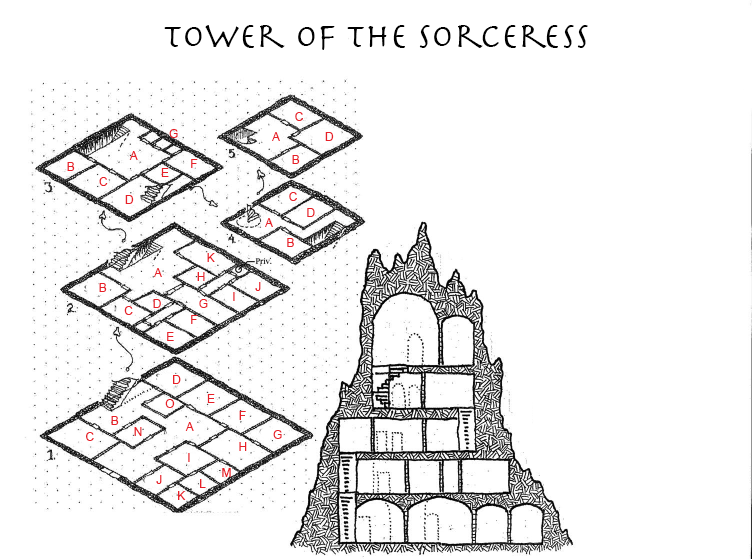
<style>
.page{position:relative;width:752px;height:559px;background:#ffffff}
.page>*{position:absolute;margin:0}
.t1{font:36px "Herculanum";color:#000000}
.t2{font:12px "ArialMT";color:#e72028}
.t3{font:12px "ArialMT"}
</style>
<div class="page">
<p class="t1" style="left:164px;top:25px;width:424px;height:25px">Tower of the Sorceress</p>
<p class="t2" style="left:295px;top:112px;width:8px;height:9px">C</p>
<p class="t2" style="left:169px;top:129px;width:9px;height:9px">G</p>
<p class="t2" style="left:272px;top:132px;width:8px;height:9px">A</p>
<p class="t2" style="left:325px;top:132px;width:9px;height:9px">D</p>
<p class="t2" style="left:129px;top:151px;width:9px;height:9px">A</p>
<p class="t2" style="left:191px;top:159px;width:7px;height:9px">F</p>
<p class="t2" style="left:292px;top:155px;width:8px;height:9px">B</p>
<p class="t2" style="left:67px;top:162px;width:8px;height:9px">B</p>
<p class="t2" style="left:161px;top:168px;width:8px;height:9px">E</p>
<p class="t2" style="left:99px;top:177px;width:9px;height:9px">C</p>
<p class="t2" style="left:125px;top:195px;width:9px;height:9px">D</p>
<p class="t2" style="left:289px;top:192px;width:8px;height:9px">C</p>
<p class="t2" style="left:307px;top:208px;width:8px;height:9px">D</p>
<p class="t2" style="left:265px;top:218px;width:8px;height:9px">A</p>
<p class="t2" style="left:287px;top:238px;width:7px;height:9px">B</p>
<p class="t2" style="left:207px;top:253px;width:8px;height:9px">K</p>
<p class="t2" style="left:154px;top:268px;width:8px;height:9px">A</p>
<p class="t2" style="left:197px;top:272px;width:8px;height:9px">H</p>
<p class="t2" style="left:99px;top:283px;width:8px;height:9px">B</p>
<p class="t3" style="left:233px;top:292px;width:2px;height:9px">I</p>
<p class="t2" style="left:255px;top:282px;width:6px;height:9px">J</p>
<p class="t2" style="left:153px;top:299px;width:8px;height:9px">D</p>
<p class="t2" style="left:199px;top:299px;width:9px;height:9px">G</p>
<p class="t2" style="left:124px;top:306px;width:9px;height:9px">C</p>
<p class="t2" style="left:191px;top:315px;width:7px;height:9px">F</p>
<p class="t2" style="left:167px;top:332px;width:7px;height:9px">E</p>
<p class="t2" style="left:173px;top:375px;width:8px;height:9px">D</p>
<p class="t2" style="left:165px;top:399px;width:10px;height:9px">O</p>
<p class="t2" style="left:207px;top:394px;width:8px;height:9px">E</p>
<p class="t2" style="left:239px;top:411px;width:7px;height:9px">F</p>
<p class="t2" style="left:111px;top:416px;width:8px;height:9px">B</p>
<p class="t2" style="left:185px;top:422px;width:9px;height:9px">A</p>
<p class="t2" style="left:86px;top:432px;width:8px;height:9px">C</p>
<p class="t2" style="left:134px;top:427px;width:8px;height:9px">N</p>
<p class="t2" style="left:273px;top:430px;width:9px;height:9px">G</p>
<p class="t2" style="left:239px;top:442px;width:8px;height:9px">H</p>
<p class="t3" style="left:188px;top:453px;width:2px;height:9px">I</p>
<p class="t2" style="left:222px;top:468px;width:9px;height:9px">M</p>
<p class="t2" style="left:156px;top:475px;width:6px;height:9px">J</p>
<p class="t2" style="left:200px;top:479px;width:6px;height:9px">L</p>
<p class="t2" style="left:178px;top:491px;width:8px;height:9px">K</p>
</div>
